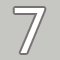
<style>
.page{position:relative;width:60px;height:60px;background:#c6c7c3}
.page>*{position:absolute;margin:0}
.t1{font:60px "MicrosoftYaHei";color:#ffffff}
</style>
<div class="page">
<p class="t1" style="left:14px;top:8px;width:31px;height:45px">7</p>
</div>
